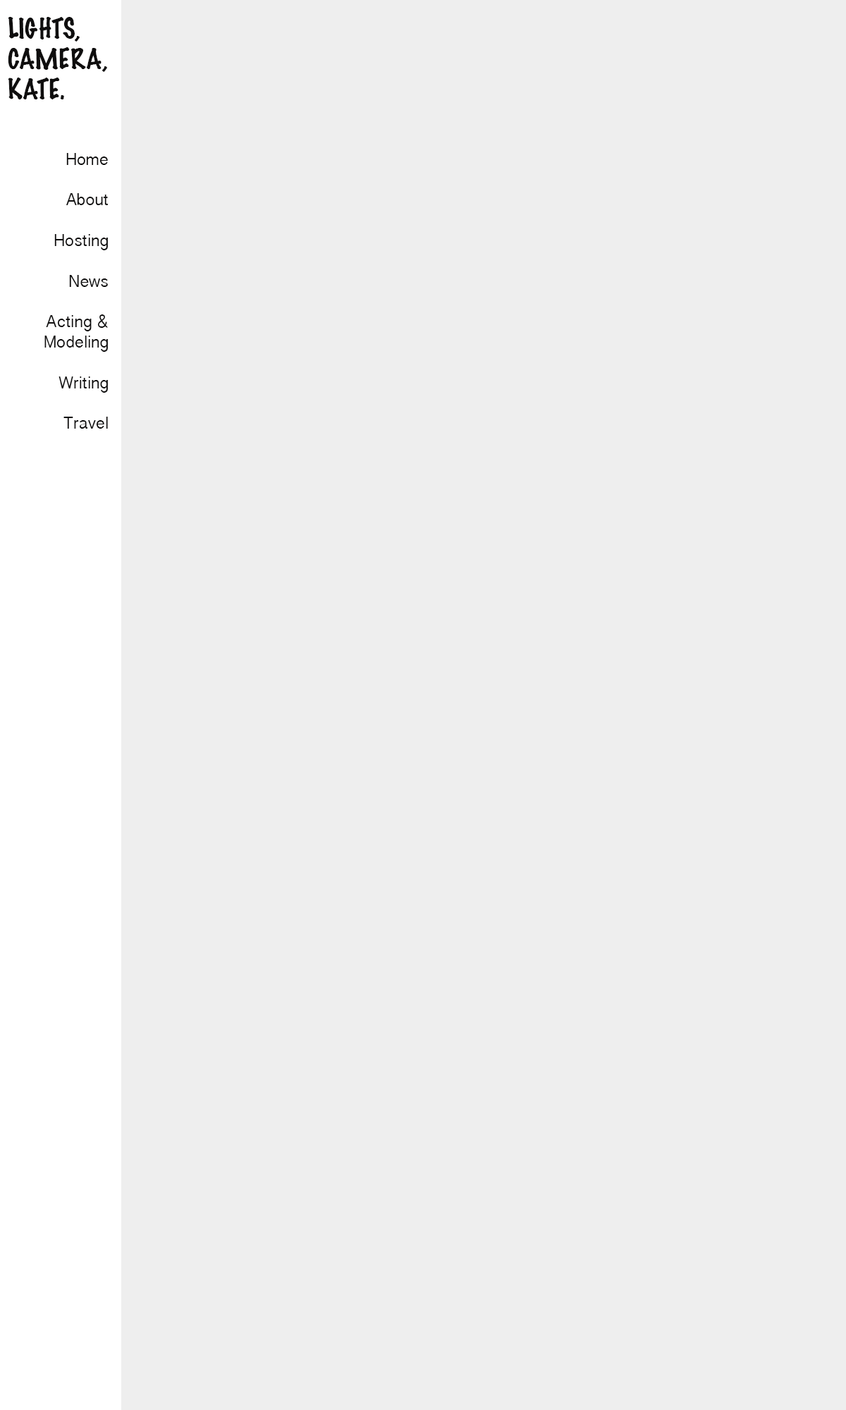
<style>
.page{position:relative;width:846px;height:1410px;background:#eeeeee}
.page>*{position:absolute;margin:0}
.t1{font:25.4px "MarkerFelt-Thin";color:#0f0e0e}
.t2{font:16.9px "MyanmarSangamMN";color:#0f0e0e}
</style>
<div class="page">
<p class="t1" style="left:8px;top:17px;width:99px;height:82px">LIGHTS,<br>CAMERA,<br>KATE.</p>
<p class="t2" style="left:44px;top:153px;width:64px;height:276px;text-align:right">Home<br><br>About<br><br>Hosting<br><br>News<br><br>Acting &amp;<br>Modeling<br><br>Writing<br><br>Travel</p>
</div>
